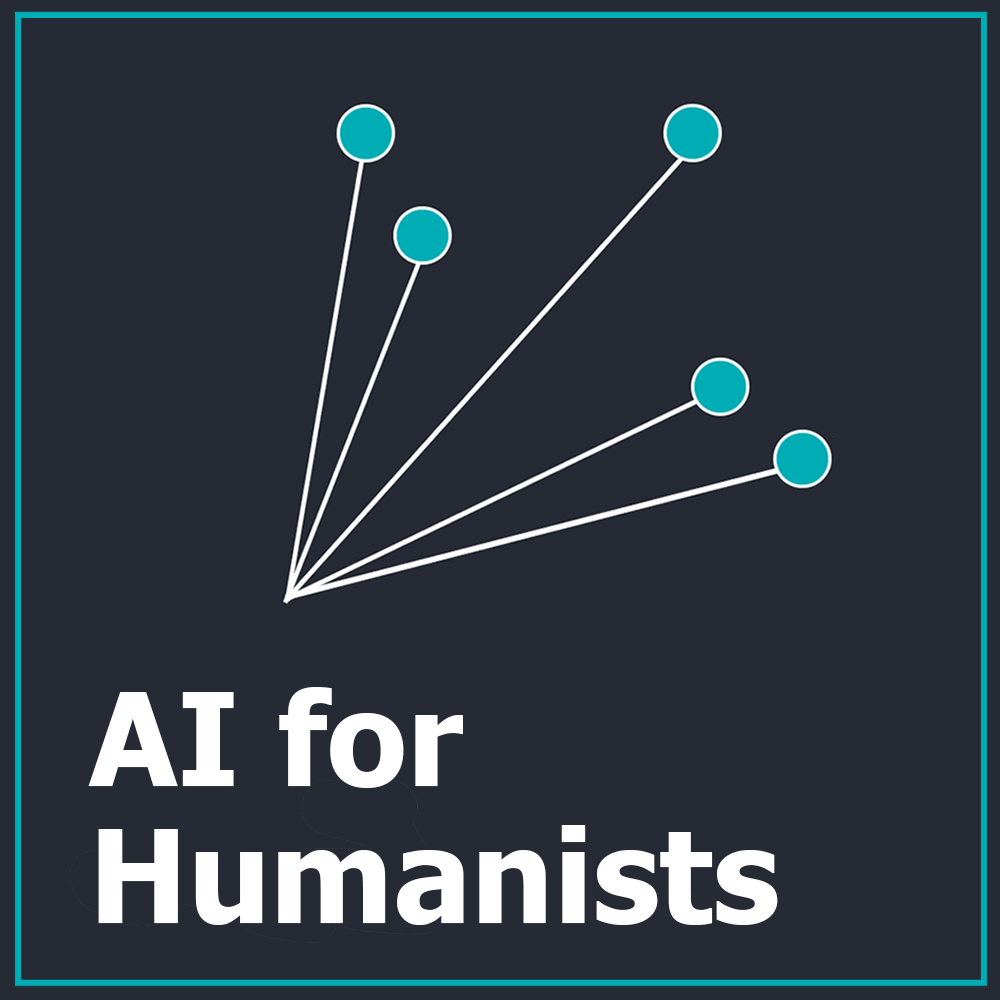
<style>
.page{position:relative;width:1000px;height:1000px;background:#252a34}
.page>*{position:absolute;margin:0}
.t1{font:129.2px/137.5px "Tahoma-Bold";color:#ffffff}
</style>
<div class="page">
<p class="t1" style="left:88px;top:687px;width:690px;height:238px">AI for Humanists</p>
</div>
